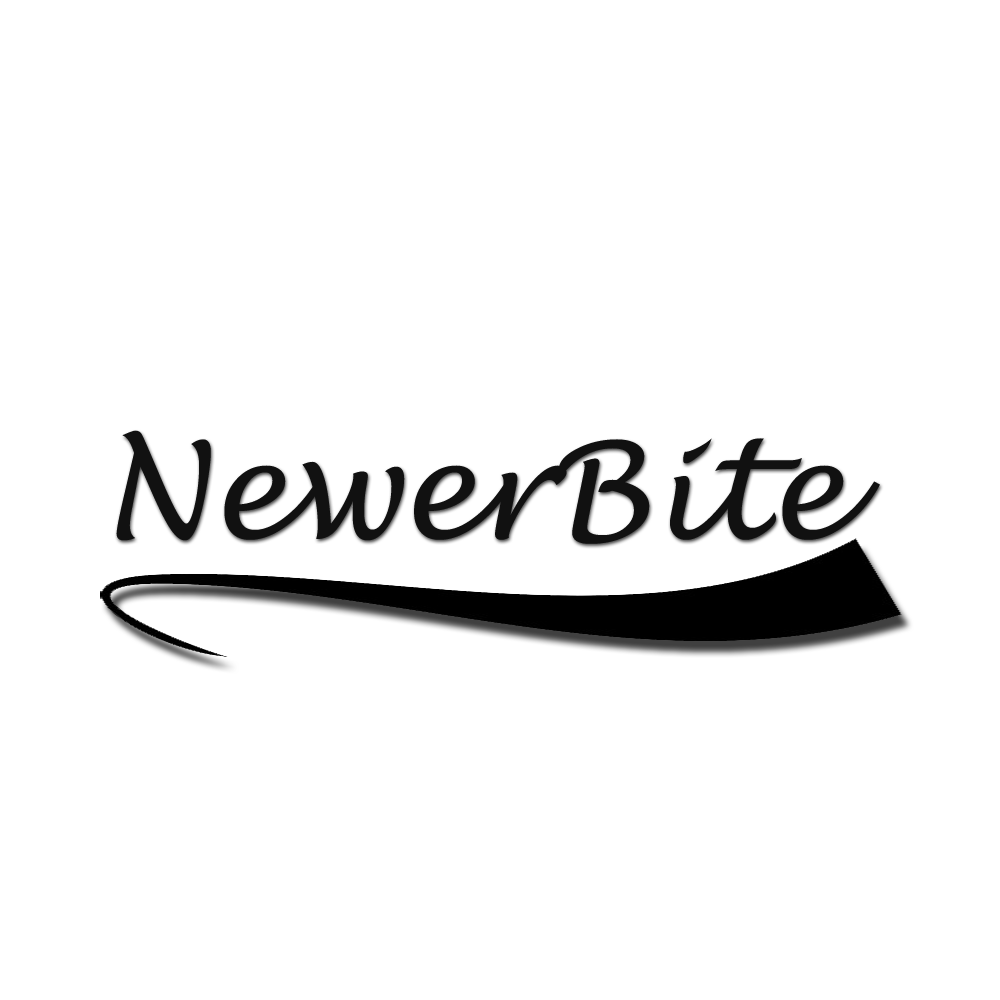
<style>
.page{position:relative;width:1000px;height:1000px;background:#ffffff}
.page>*{position:absolute;margin:0}
.t1{font:133.3px "LucidaHandwriting-Italic";color:#111111}
</style>
<div class="page">
<p class="t1" style="left:116px;top:430px;width:764px;height:114px">NewerBite</p>
</div>
